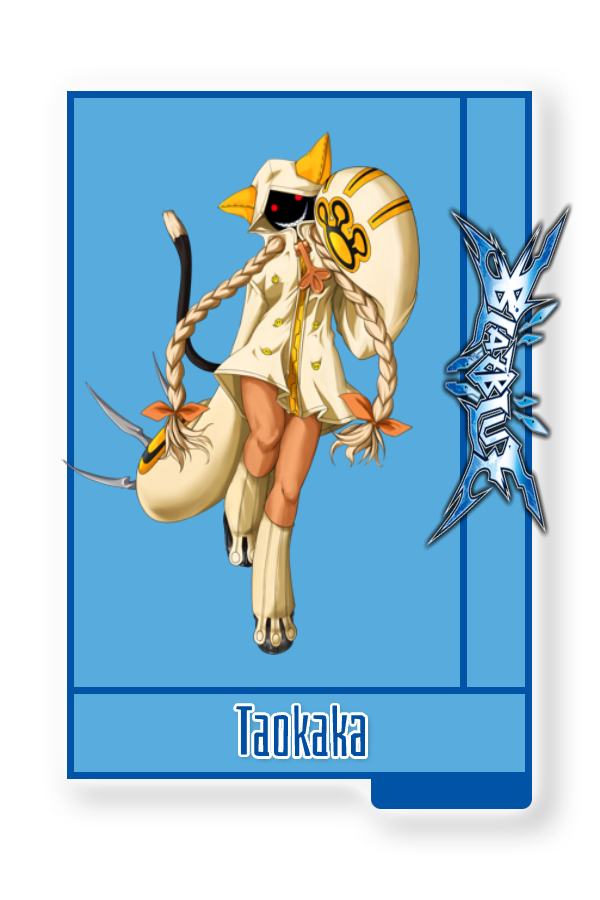
<style>
.page{position:relative;width:600px;height:900px;background:#58acdd}
.page>*{position:absolute;margin:0}
.t1{font:70px "Bahianita-Regular";color:#004fa2}
</style>
<div class="page">
<p class="t1" style="left:236px;top:705px;width:129px;height:51px">Taokaka</p>
</div>
